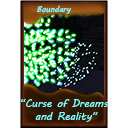
<style>
.page{position:relative;width:128px;height:128px;background:#ffffff}
.page>*{position:absolute;margin:0}
.t1{font:8px "MVBoli";color:#7fffff}
.t2{font:10.7px "MVBoli";color:#7fffff}
</style>
<div class="page">
<p class="t1" style="left:37px;top:5px;width:34px;height:9px">Boundary</p>
<p class="t2" style="left:20px;top:99px;width:89px;height:23px;text-align:center">“Curse of Dreams <br>and Reality"</p>
</div>
